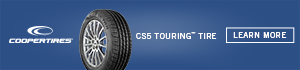
<style>
.page{position:relative;width:300px;height:70px;background:#2c4f86}
.page>*{position:absolute;margin:0}
.t1{font:8.2px "TradeGothic";letter-spacing:0.025em;color:#ffffff;text-transform:uppercase}
.t2{font:7px "TradeGothic";letter-spacing:0.025em;color:#ffffff;text-transform:uppercase}
.t3{font:8.1px "TradeGothic";letter-spacing:0.05em;color:#ffffff;text-transform:uppercase}
</style>
<div class="page">
<p class="t1" style="left:136px;top:32px;width:81px;height:7px">cs5 tourinG<span class="t2">™</span> TIRE</p>
<p class="t3" style="left:233px;top:32px;width:54px;height:6px">Learn More</p>
</div>
